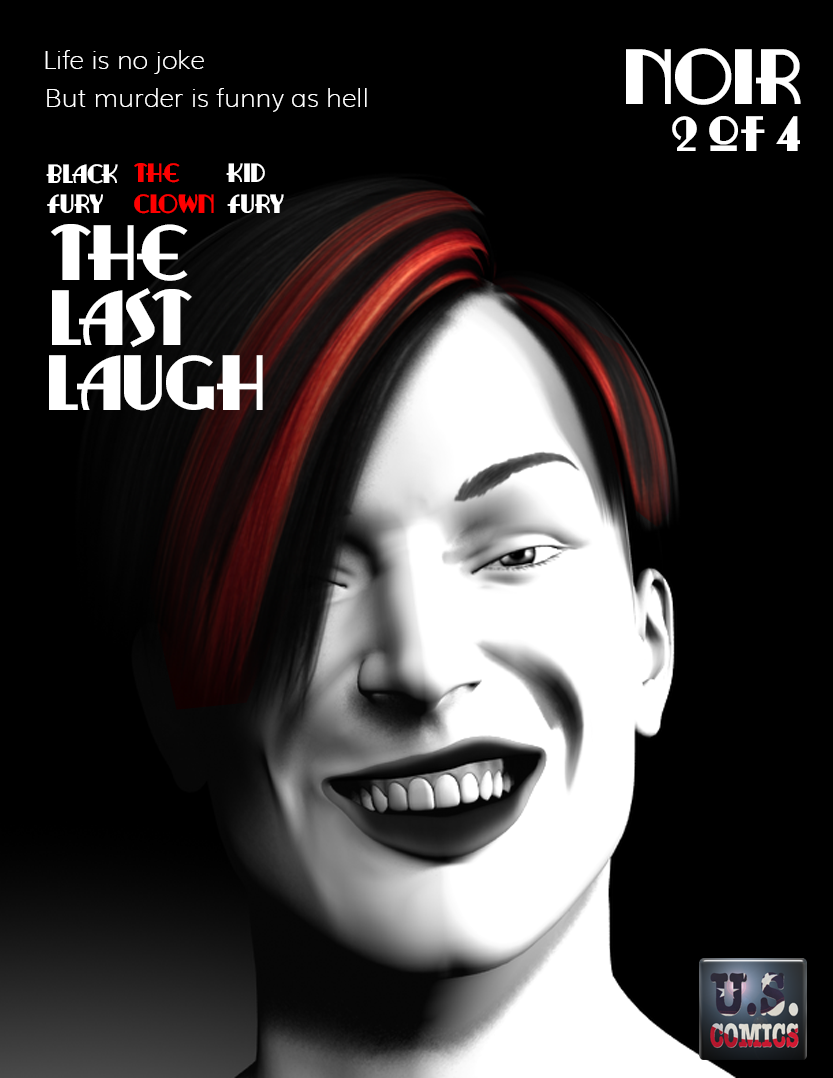
<style>
.page{position:relative;width:833px;height:1078px;background:#000000}
.page>*{position:absolute;margin:0}
.t1{font:25.6px "Muli-ExtraLight";color:#ffffff}
.t2{font:73px "RitzyRemixNF";color:#ffffff}
.t3{font:46.4px "RitzyRemixNF";color:#ffffff}
.t4{font:24.9px "RitzyRemixNF";color:#ffffff}
.t5{font:24.9px "RitzyRemixNF";color:#ff0000}
</style>
<div class="page">
<p class="t1" style="left:45px;top:50px;width:159px;height:24px">Life is no joke</p>
<p class="t2" style="left:626px;top:48px;width:175px;height:57px">NOIR</p>
<p class="t2" style="left:628px;top:50px;width:175px;height:57px">NOIR</p>
<p class="t1" style="left:47px;top:88px;width:320px;height:24px">But murder is funny as hell</p>
<p class="t3" style="left:672px;top:116px;width:128px;height:35px">2 of 4</p>
<p class="t4" style="left:46px;top:164px;width:72px;height:20px">BLACK</p>
<p class="t5" style="left:134px;top:163px;width:46px;height:20px">THE</p>
<p class="t4" style="left:226px;top:163px;width:39px;height:19px">KID</p>
<p class="t4" style="left:47px;top:194px;width:56px;height:19px">FURY</p>
<p class="t5" style="left:134px;top:194px;width:80px;height:20px">CLOWN</p>
<p class="t4" style="left:227px;top:194px;width:57px;height:19px">FURY</p>
<p class="t2" style="left:51px;top:224px;width:137px;height:57px">THE</p>
<p class="t2" style="left:52px;top:288px;width:140px;height:60px">LAST</p>
<p class="t2" style="left:49px;top:355px;width:214px;height:56px">LAUGH</p>
</div>
